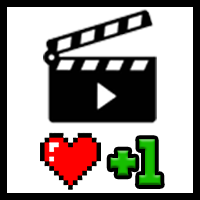
<style>
.page{position:relative;width:200px;height:200px;background:#ffffff}
.page>*{position:absolute;margin:0}
.t1{font:65.1px "UniformBoldBold";color:#16be00}
</style>
<div class="page">
<p class="t1" style="left:110px;top:139px;width:51px;height:46px">+1</p>
</div>
